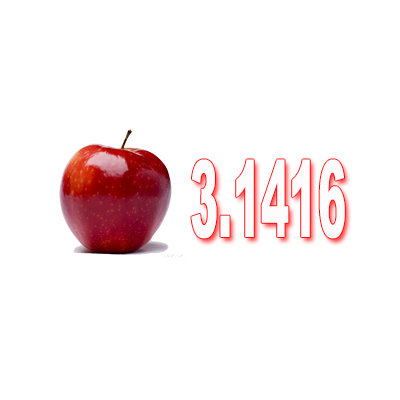
<style>
.page{position:relative;width:400px;height:400px;background:#ffffff}
.page>*{position:absolute;margin:0}
.t1{font:106.5px "Arial-Black";color:#fdfbfb;scale:0.4 1}
</style>
<div class="page">
<p class="t1" style="left:191px;top:159px;width:154px;height:80px">3.1416</p>
</div>
